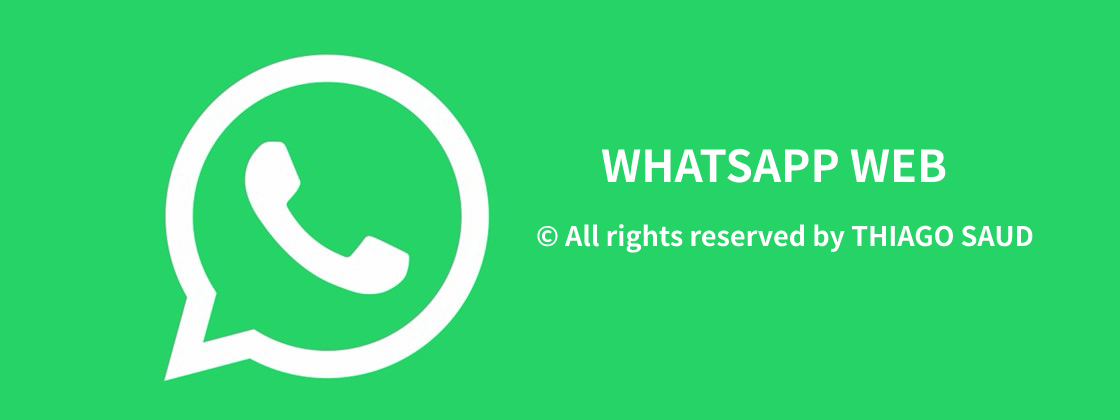
<style>
.page{position:relative;width:1120px;height:420px;background:#26d367}
.page>*{position:absolute;margin:0}
.t1{font:44px "SourceHanSans-Bold";color:#ffffff}
.t2{font:27px "SourceHanSans-Bold";color:#ffffff}
</style>
<div class="page">
<p class="t1" style="left:601px;top:148px;width:345px;height:35px">WHATSAPP WEB</p>
<p class="t2" style="left:537px;top:224px;width:496px;height:29px">© All rights reserved by THIAGO SAUD</p>
</div>
